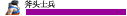
<style>
.page{position:relative;width:127px;height:16px;background:#ffffff}
.page>*{position:absolute;margin:0}
.t1{font:8px "SimSun";letter-spacing:-0.05em;color:#151715;text-transform:uppercase}
</style>
<div class="page">
<p class="t1" style="left:24px;top:0px;width:31px;height:8px">斧头士兵</p>
</div>
